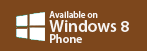
<style>
.page{position:relative;width:147px;height:51px;background:#7d471c}
.page>*{position:absolute;margin:0}
.t1{font:9px "MyriadPro-Semibold";color:#f6f4f3}
.t2{font:17px "MyriadPro-Semibold";color:#f6f4f3}
.t3{font:12px "MyriadPro-Semibold";color:#f6f4f3}
</style>
<div class="page">
<p class="t1" style="left:49px;top:11px;width:49px;height:7px">Available on</p>
<p class="t2" style="left:49px;top:20px;width:80px;height:12px">Windows 8</p>
<p class="t3" style="left:50px;top:34px;width:32px;height:9px">Phone</p>
</div>
